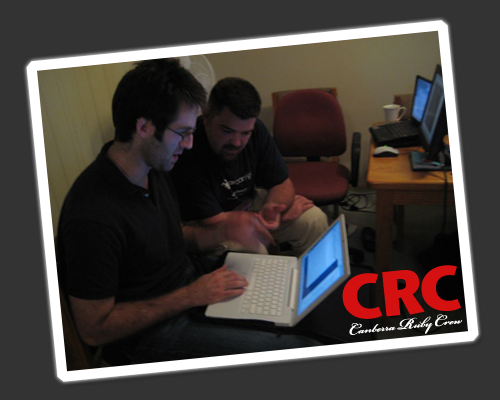
<style>
.page{position:relative;width:500px;height:400px;background:#333333}
.page>*{position:absolute;margin:0}
.t1{font:61.9px "StoneSansITC-Bold";letter-spacing:-0.05em;color:#d41010;font-weight:bold}
.t2{font:61.9px "StoneSansITC-Bold";letter-spacing:-0.1em;color:#d41010;font-weight:bold}
.t3{font:61.9px "StoneSansITC-Bold";letter-spacing:-0.075em;color:#d41010;font-weight:bold}
.t4{font:16.9px "BickhamScriptPro-Bold";color:#fffefe}
.t5{font:22.5px "BickhamScriptPro-Bold";color:#fffefe}
</style>
<div class="page">
<p class="t1" style="left:342px;top:265px;width:119px;height:54px;rotate:-6deg">C<span class="t2">R</span><span class="t3">C</span></p>
<p class="t4" style="left:349px;top:314px;width:114px;height:21px;rotate:-6deg"><span class="t5">C</span>anberra <span class="t5">R</span>uby <span class="t5">C</span>rew</p>
</div>
